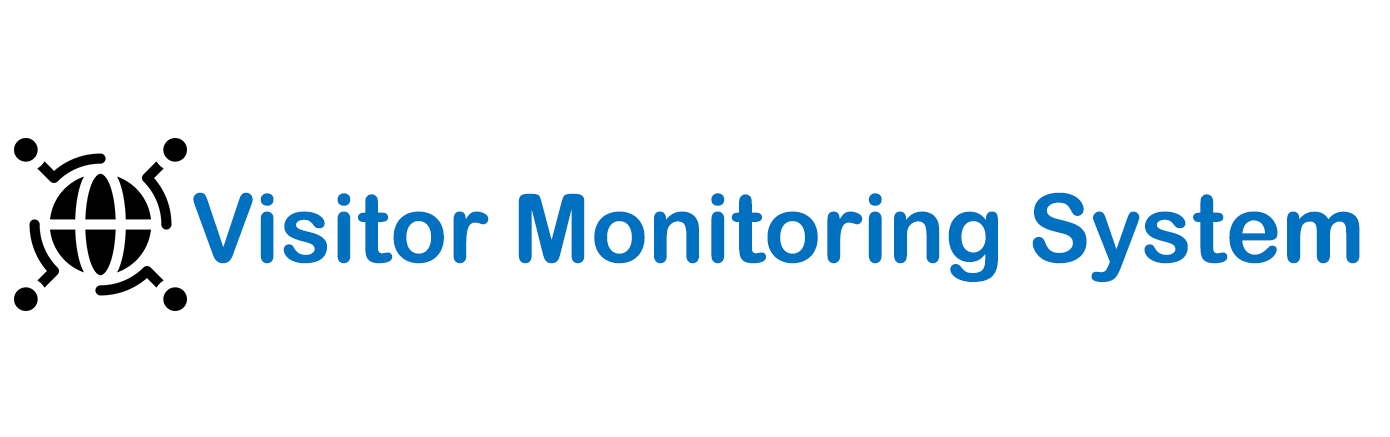
<style>
.page{position:relative;width:1390px;height:437px;background:#ffffff}
.page>*{position:absolute;margin:0}
.t1{font:95px "ArialRoundedMTBold";color:#0070c0}
</style>
<div class="page">
<p class="t1" style="left:193px;top:192px;width:1167px;height:90px">Visitor Monitoring System</p>
</div>
